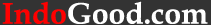
<style>
.page{position:relative;width:211px;height:25px;background:#333333}
.page>*{position:absolute;margin:0}
.t1{font:30px "BookAntiqua-Bold";color:#ffffff}
.t2{font:30px "BookAntiqua-Bold";color:#ff0000}
</style>
<div class="page">
<p class="t1" style="left:2px;top:1px;width:206px;height:23px"><span class="t2">Indo</span>Good.com</p>
</div>
